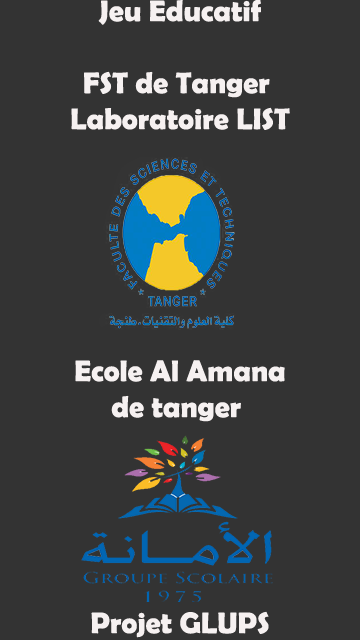
<style>
.page{position:relative;width:360px;height:640px;background:#333333}
.page>*{position:absolute;margin:0}
.t1{font:30px "BerlinSansFBDemi-Bold";color:#f6f1f1}
</style>
<div class="page">
<p class="t1" style="left:71px;top:0px;width:219px;height:638px;text-align:center">Jeu Educatif<br><br> FST de Tanger<br>Laboratoire LIST<br><br><br><br><br><br><br>Ecole Al Amana<br> de tanger<br><br><br><br><br><br>Projet GLUPS</p>
</div>
